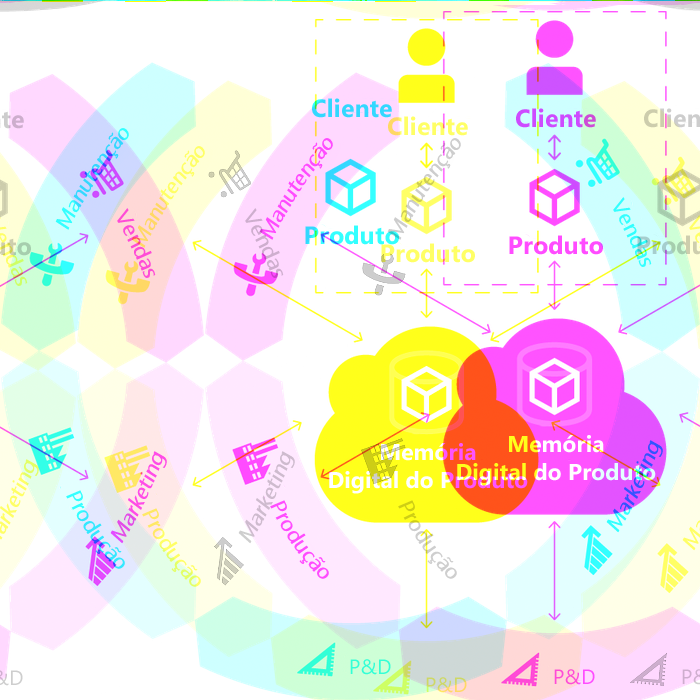
<style>
.page{position:relative;width:700px;height:700px;background:#ffffff}
.page>*{position:absolute;margin:0}
.t1{font:25px "Gadugi-Bold";color:#33d8ff}
.t2{font:20.8px "Gadugi"}
.t3{font:20.8px "Gadugi";scale:1.04 1}
.t4{font:25px "Gadugi-Bold"}
</style>
<div class="page">
<p class="t1" style="left:312px;top:97px;width:80px;height:20px">Cliente</p>
<p class="t2" style="left:55px;top:127px;width:74px;height:102px;rotate:-57deg">Manutenção</p>
<p class="t3" style="left:613px;top:196px;width:39px;height:70px;rotate:64deg">Vendas</p>
<p class="t4" style="left:305px;top:224px;width:94px;height:20px">Produto</p>
<p class="t2" style="left:606px;top:439px;width:57px;height:93px;rotate:-64deg">Marketing</p>
<p class="t2" style="left:66px;top:489px;width:59px;height:79px;rotate:55deg">Produção</p>
<p class="t2" style="left:350px;top:658px;width:41px;height:16px">P&amp;D</p>
</div>
